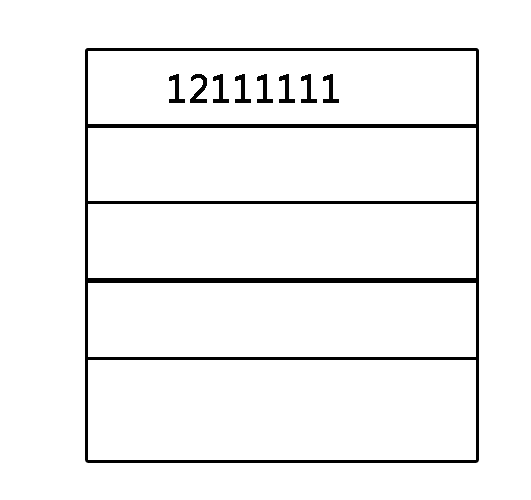
<style>
.page{position:relative;width:531px;height:500px;background:#ffffff}
.page>*{position:absolute;margin:0}
.t1{font:36px "MicrosoftYaHei";color:#030303;font-weight:bold}
</style>
<div class="page">
<p class="t1" style="left:169px;top:74px;width:170px;height:29px">12111111</p>
</div>
